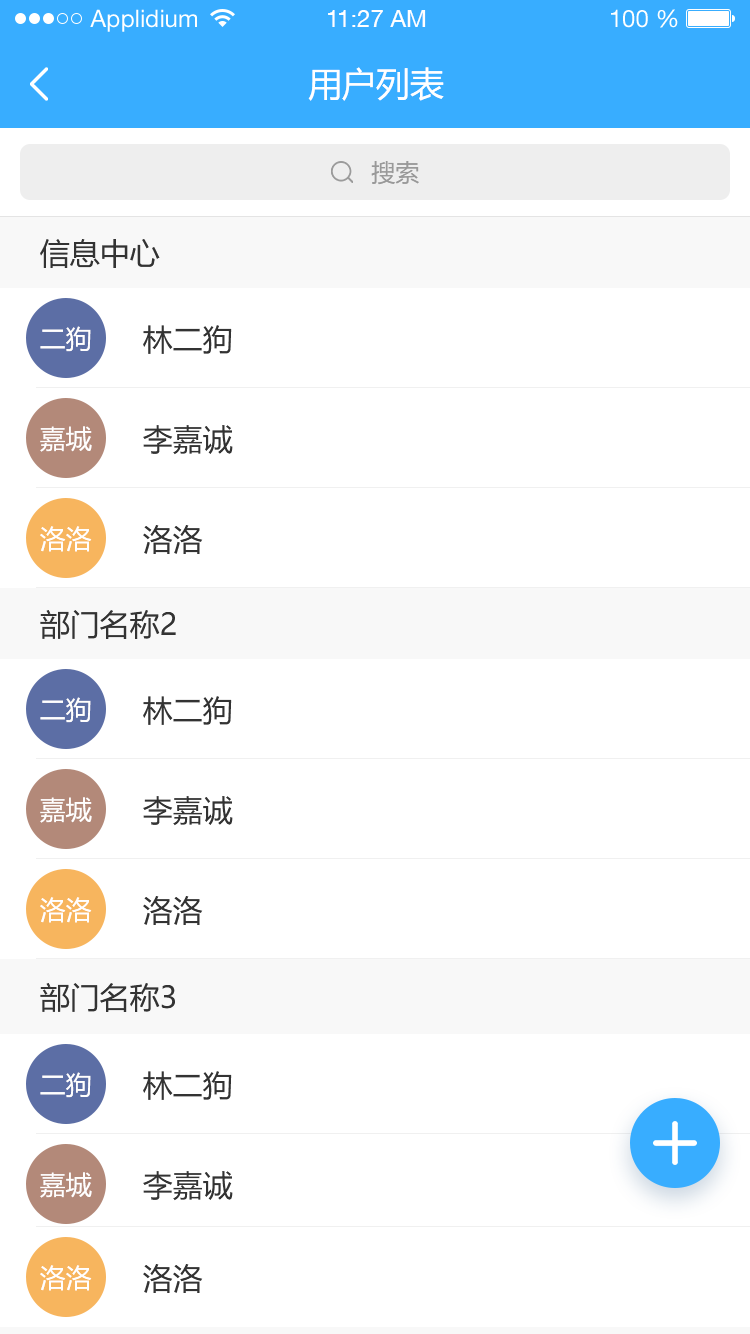
<style>
.page{position:relative;width:750px;height:1334px;background:#ffffff}
.page>*{position:absolute;margin:0}
.t1{font:24px "HelveticaNeueLTStd-Roman";color:#ffffff}
.t2{font:24px "HelveticaNeueCE-Roman";color:#ffffff}
.t3{font:34px "MicrosoftYaHei";color:#ffffff}
.t4{font:24px "MicrosoftYaHei";color:#999999}
.t5{font:30px "MicrosoftYaHei";color:#333333}
.t6{font:26px "MicrosoftYaHei";color:#fffefe}
</style>
<div class="page">
<p class="t1" style="left:90px;top:9px;width:107px;height:23px">Applidium</p>
<p class="t2" style="left:328px;top:10px;width:98px;height:17px">11:27 AM</p>
<p class="t1" style="left:611px;top:9px;width:67px;height:19px">100 %</p>
<p class="t3" style="left:308px;top:67px;width:136px;height:34px">用户列表</p>
<p class="t4" style="left:371px;top:161px;width:48px;height:24px">搜索</p>
<p class="t5" style="left:40px;top:239px;width:120px;height:29px">信息中心</p>
<p class="t6" style="left:40px;top:326px;width:51px;height:26px">二狗</p>
<p class="t5" style="left:143px;top:325px;width:89px;height:29px">林二狗</p>
<p class="t5" style="left:143px;top:425px;width:90px;height:30px">李嘉诚</p>
<p class="t6" style="left:40px;top:426px;width:52px;height:26px">嘉城</p>
<p class="t6" style="left:40px;top:526px;width:52px;height:26px">洛洛</p>
<p class="t5" style="left:143px;top:525px;width:60px;height:29px">洛洛</p>
<p class="t5" style="left:40px;top:610px;width:136px;height:29px">部门名称2</p>
<p class="t6" style="left:40px;top:697px;width:51px;height:26px">二狗</p>
<p class="t5" style="left:143px;top:696px;width:89px;height:29px">林二狗</p>
<p class="t6" style="left:40px;top:797px;width:52px;height:26px">嘉城</p>
<p class="t5" style="left:143px;top:796px;width:90px;height:30px">李嘉诚</p>
<p class="t6" style="left:40px;top:897px;width:52px;height:26px">洛洛</p>
<p class="t5" style="left:143px;top:896px;width:60px;height:29px">洛洛</p>
<p class="t5" style="left:40px;top:983px;width:135px;height:29px">部门名称3</p>
<p class="t6" style="left:40px;top:1072px;width:51px;height:26px">二狗</p>
<p class="t5" style="left:143px;top:1071px;width:89px;height:29px">林二狗</p>
<p class="t6" style="left:40px;top:1172px;width:52px;height:26px">嘉城</p>
<p class="t5" style="left:143px;top:1171px;width:90px;height:30px">李嘉诚</p>
<p class="t6" style="left:40px;top:1265px;width:52px;height:26px">洛洛</p>
<p class="t5" style="left:143px;top:1264px;width:60px;height:29px">洛洛</p>
</div>
